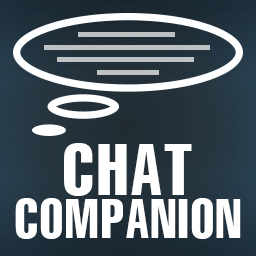
<style>
.page{position:relative;width:256px;height:256px}
.page>*{position:absolute;margin:0}
.t1{font:54px/43.1px "Helvetica-Compressed";letter-spacing:0.04em;color:#ffffff;scale:0.93 1}
.t2{font:72px/43.1px "Helvetica-Compressed";letter-spacing:0.04em;color:#ffffff;scale:0.93 1}
</style>
<div class="page">
<p class="t1" style="left:15px;top:143px;width:226px;height:96px;text-align:center"><span class="t2">CHAT<br></span>COMPANION</p>
</div>
